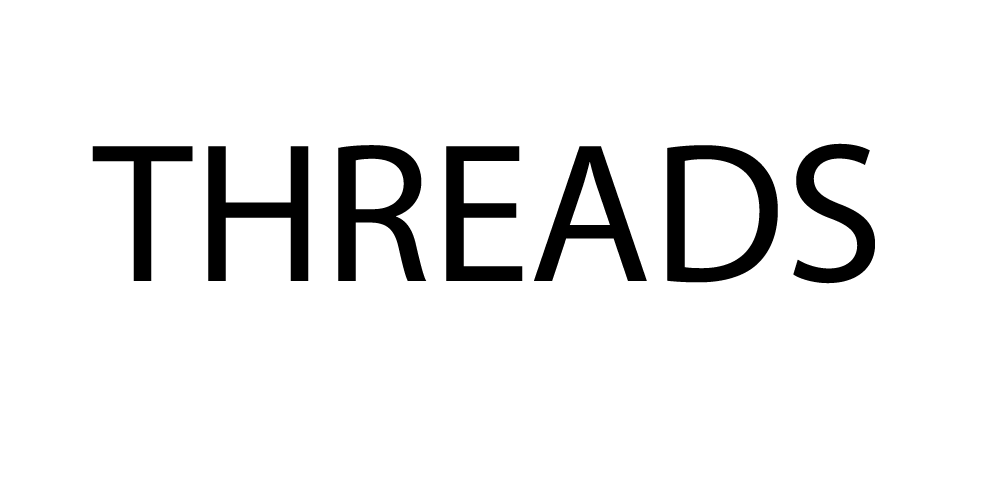
<style>
.page{position:relative;width:1000px;height:500px;background:#ffffff}
.page>*{position:absolute;margin:0}
.t1{font:200px "MyriadPro-Regular";color:#000000}
</style>
<div class="page">
<p class="t1" style="left:92px;top:143px;width:783px;height:141px">THREADS</p>
</div>
